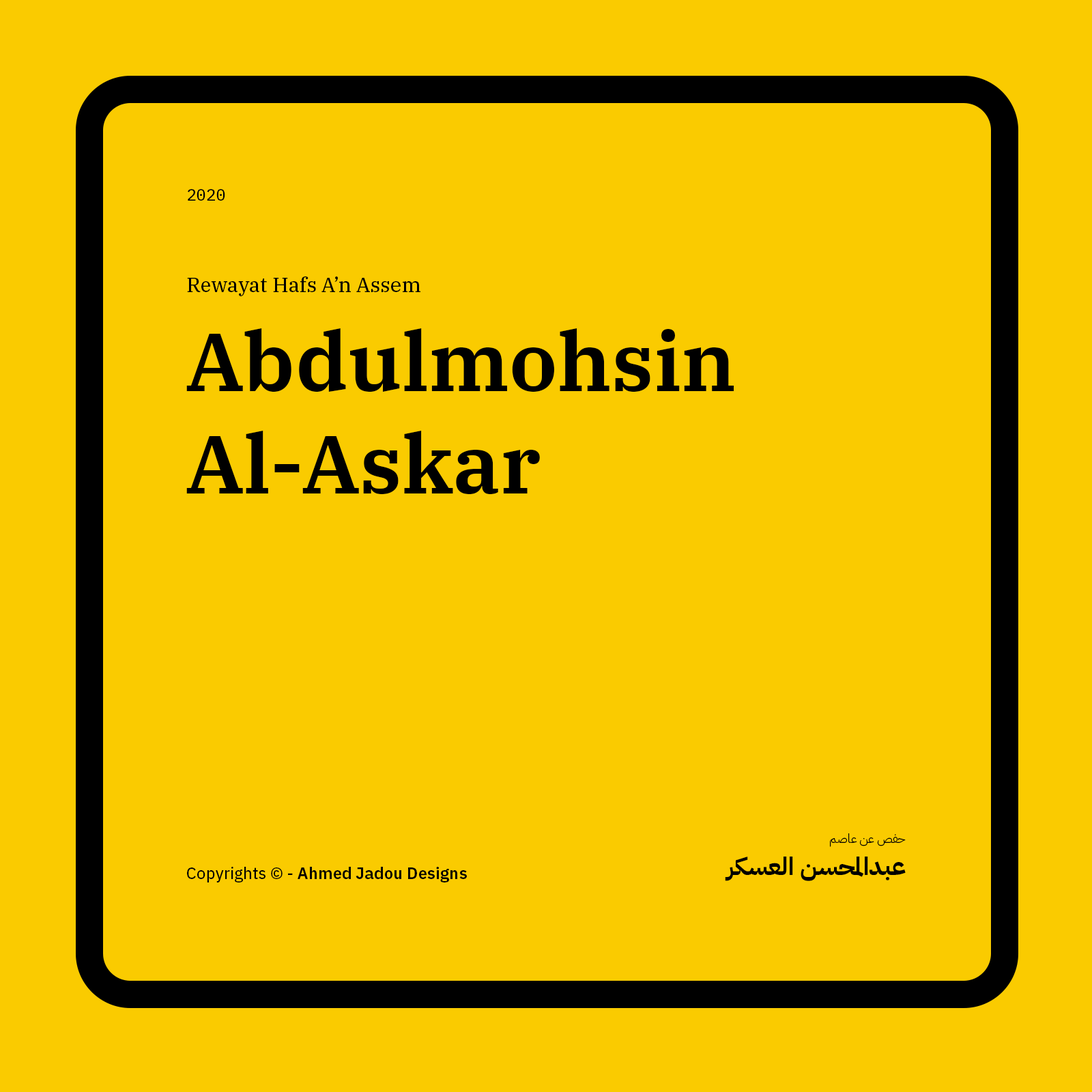
<style>
.page{position:relative;width:1092px;height:1092px;background:#facb00}
.page>*{position:absolute;margin:0}
.t1{font:16.4px "IBMPlexMono-Text";color:#000000}
.t2{font:20.5px "IBMPlexSerif-Text";color:#000000}
.t3{font:81.9px/102.7px "IBMPlexSerif-SemiBold";color:#000000}
.t4{font:12.3px "IBMPlexArabic-Light";color:#000000}
.t5{font:24.6px "IBMPlexArabic-Bold";color:#000000}
.t6{font:16.4px "IBMPlexSans-SemiBold";color:#000000}
.t7{font:16.4px "IBMPlexSans-Text";color:#000000}
</style>
<div class="page">
<p class="t1" style="left:188px;top:189px;width:37px;height:12px">2020</p>
<p class="t2" style="left:187px;top:276px;width:233px;height:20px">Rewayat Hafs A’n Assem</p>
<p class="t3" style="left:186px;top:328px;width:548px;height:166px">Abdulmohsin Al-Askar</p>
<p class="t4" style="left:830px;top:833px;width:76px;height:14px">حفص عن عاصم</p>
<p class="t5" style="left:725px;top:857px;width:181px;height:24px">عبدالمحسن العسكر</p>
<p class="t6" style="left:187px;top:867px;width:280px;height:15px"><span class="t7">Copyrights © - </span>Ahmed Jadou Designs</p>
</div>
